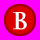
<style>
.page{position:relative;width:40px;height:40px;background:#fc00ff}
.page>*{position:absolute;margin:0}
.t1{font:24px "CharlemagneStd-Bold";color:#ffffff}
</style>
<div class="page">
<p class="t1" style="left:13px;top:12px;width:14px;height:18px">B</p>
</div>
